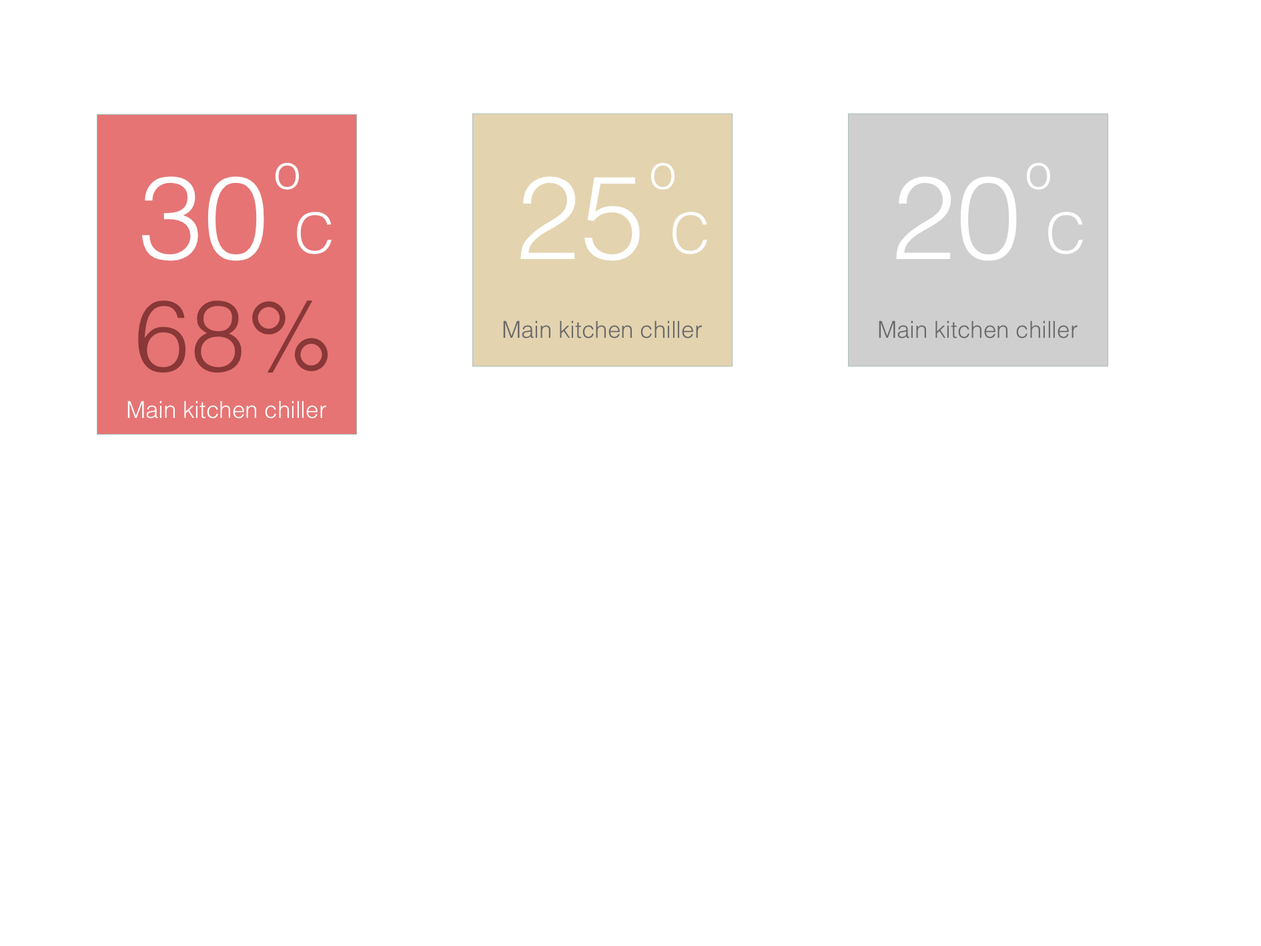
<style>
.page{position:relative;width:1261px;height:946px;background:#ffffff}
.page>*{position:absolute;margin:0}
.t1{font:49px "Helvetica-Light";color:#ffffff}
.t2{font:116.9px "Helvetica-Light";color:#ffffff}
.t3{font:55.7px "Helvetica-Light";color:#ffffff}
.t4{font:100.1px "Helvetica-Light";color:#893737}
.t5{font:23.4px "Helvetica-Light";color:#676767}
.t6{font:23.4px "Helvetica-Light";color:#ffffff}
</style>
<div class="page">
<p class="t1" style="left:275px;top:163px;width:24px;height:27px">o</p>
<p class="t1" style="left:651px;top:163px;width:24px;height:27px">o</p>
<p class="t1" style="left:1026px;top:163px;width:24px;height:27px">o</p>
<p class="t2" style="left:142px;top:176px;width:122px;height:85px">30</p>
<p class="t2" style="left:520px;top:176px;width:120px;height:85px">25</p>
<p class="t2" style="left:896px;top:176px;width:121px;height:85px">20</p>
<p class="t3" style="left:297px;top:212px;width:35px;height:42px">C</p>
<p class="t3" style="left:673px;top:212px;width:34px;height:42px">C</p>
<p class="t3" style="left:1048px;top:212px;width:35px;height:42px">C</p>
<p class="t4" style="left:138px;top:300px;width:190px;height:73px">%68</p>
<p class="t5" style="left:503px;top:320px;width:199px;height:18px">Main kitchen chiller</p>
<p class="t5" style="left:879px;top:320px;width:199px;height:18px">Main kitchen chiller</p>
<p class="t6" style="left:127px;top:400px;width:199px;height:18px">Main kitchen chiller</p>
</div>
